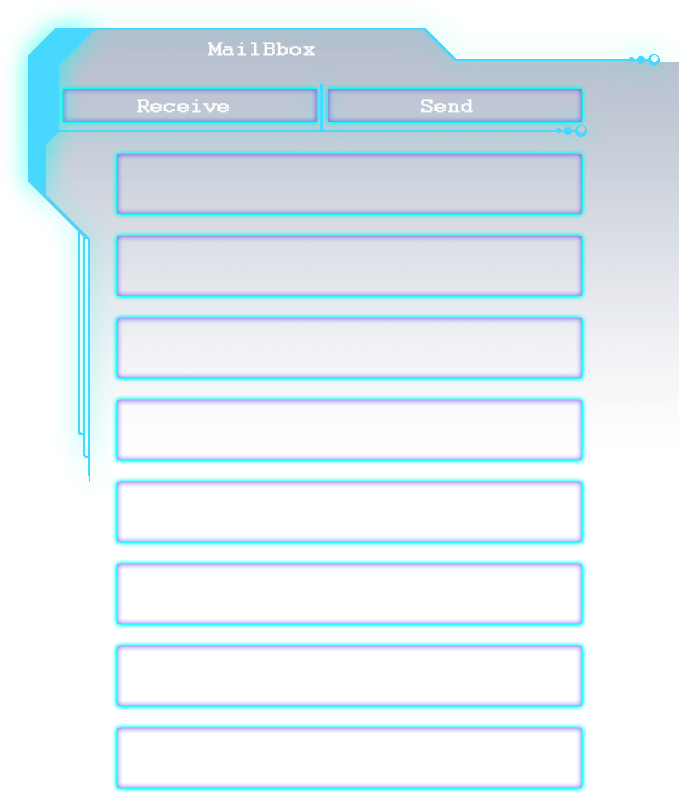
<style>
.page{position:relative;width:689px;height:794px;background:#ffffff}
.page>*{position:absolute;margin:0}
.t1{font:20px "Courier";color:#ffffff;font-weight:bold;scale:1.19 1}
</style>
<div class="page">
<p class="t1" style="left:208px;top:42px;width:107px;height:14px">MailBbox</p>
<p class="t1" style="left:137px;top:99px;width:92px;height:14px">Receive</p>
<p class="t1" style="left:421px;top:99px;width:52px;height:14px">Send</p>
</div>
